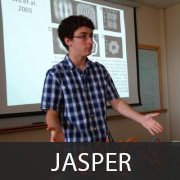
<style>
.page{position:relative;width:180px;height:180px}
.page>*{position:absolute;margin:0}
.t1{font:26.7px "MyriadPro-Regular";color:#faf7f7}
</style>
<div class="page">
<p class="t1" style="left:51px;top:153px;width:80px;height:18px">JASPER</p>
</div>
